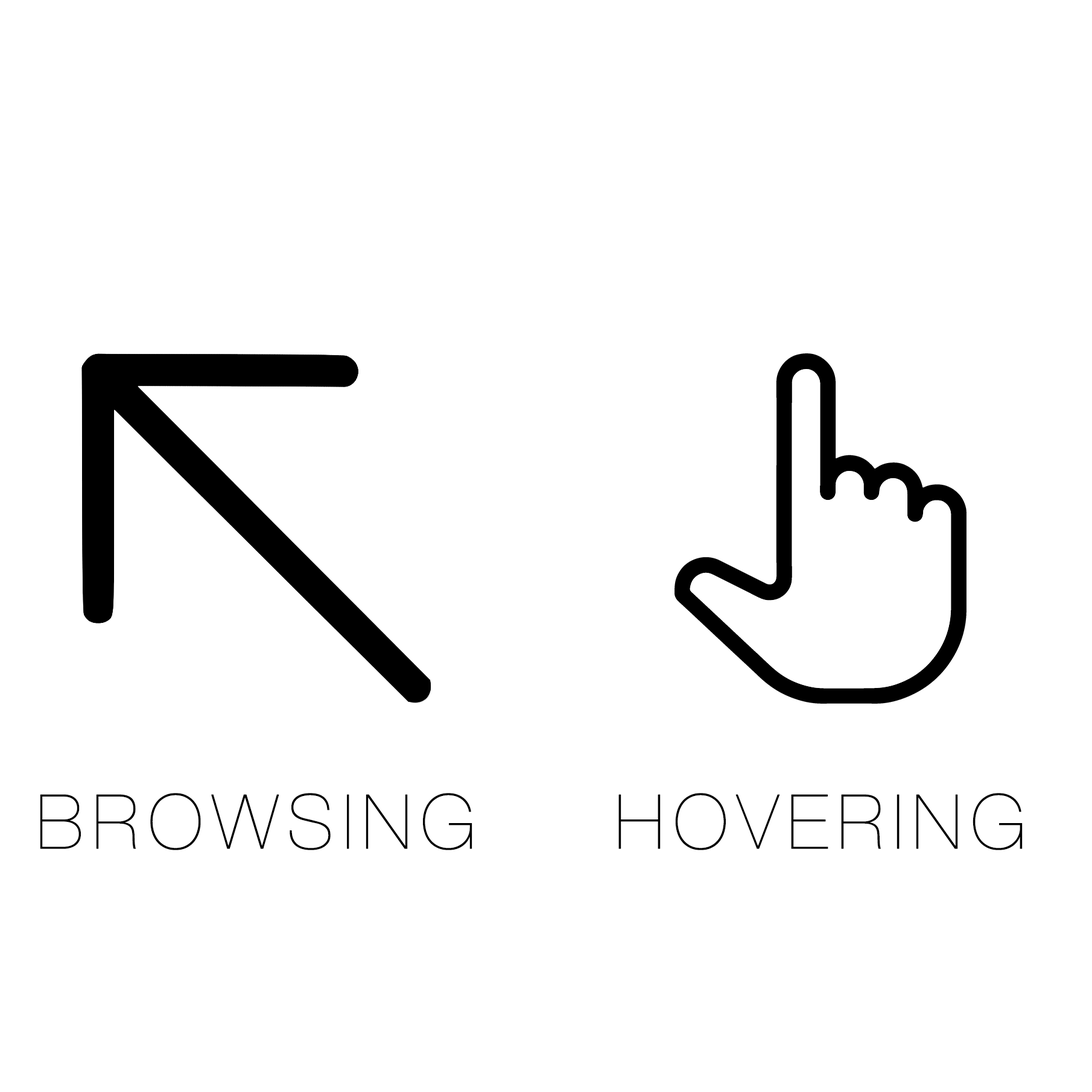
<style>
.page{position:relative;width:1092px;height:1092px;background:#ffffff}
.page>*{position:absolute;margin:0}
.t1{font:75.4px "HelveticaNeue-UltraLight";letter-spacing:0.1em;color:#000000;font-weight:bold}
</style>
<div class="page">
<p class="t1" style="left:40px;top:793px;width:432px;height:57px">BROWSING</p>
<p class="t1" style="left:618px;top:793px;width:404px;height:57px">HOVERING</p>
</div>
